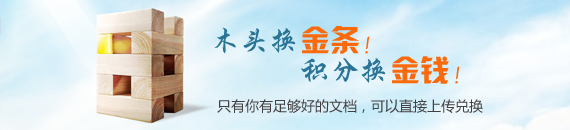
<style>
.page{position:relative;width:570px;height:130px}
.page>*{position:absolute;margin:0}
.t1{font:30px/30px "HYi1gj";color:#2a7496}
.t2{font:30px/30px "HYk2gj";color:#fa6a0b}
.t3{font:30px/30px "HYi1gj";color:#fa6a0b}
.t4{font:14px "MicrosoftYaHei";color:#424040}
</style>
<div class="page">
<p class="t1" style="left:214px;top:26px;width:246px;height:58px">木头换<span class="t2">金条</span><span class="t3">！<br></span>      积分换<span class="t2">金钱</span><span class="t3">！</span></p>
<p class="t4" style="left:217px;top:99px;width:266px;height:14px">只有你有足够好的文档，可以直接上传兑换</p>
</div>
